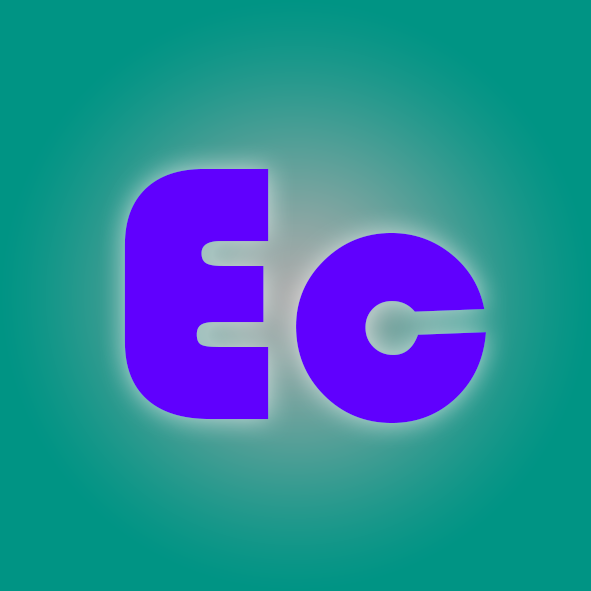
<style>
.page{position:relative;width:591px;height:591px;background:#009484}
.page>*{position:absolute;margin:0}
.t1{font:375px "Bauhaus93";color:#6000fe}
</style>
<div class="page">
<p class="t1" style="left:124px;top:169px;width:362px;height:254px">Ec</p>
</div>
